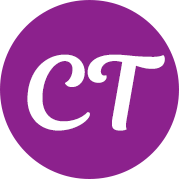
<style>
.page{position:relative;width:180px;height:180px;background:#8c218d}
.page>*{position:absolute;margin:0}
.t1{font:100px "Magnolia-Script";color:#ffffff;font-weight:bold}
</style>
<div class="page">
<p class="t1" style="left:27px;top:54px;width:138px;height:77px">CT</p>
</div>
